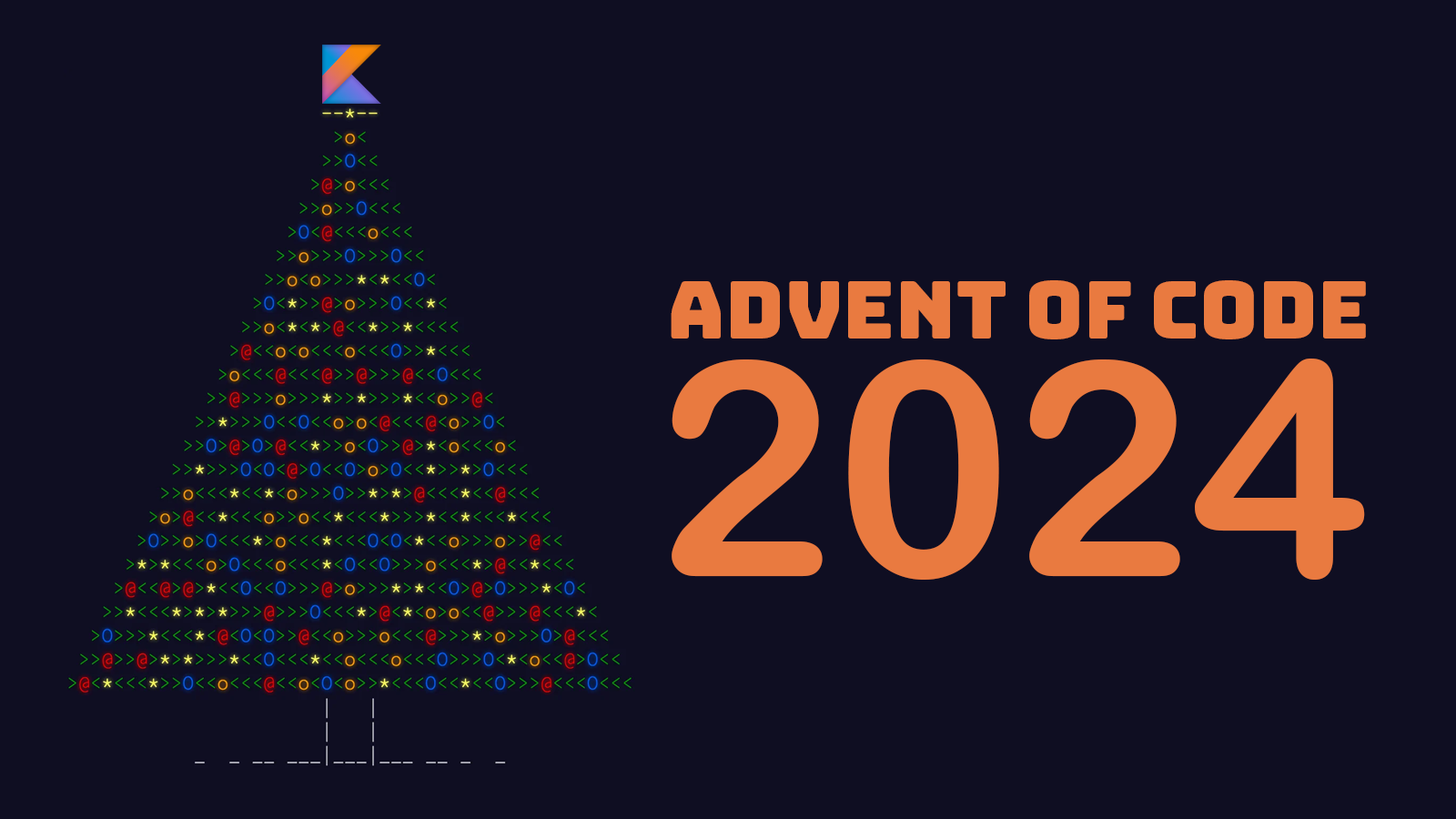
<style>
.page{position:relative;width:1456px;height:819px;background:#0f0e22}
.page>*{position:absolute;margin:0}
.t1{font:79.7px "Bungee-Regular";color:#e97a40}
.t2{font:300.4px "ArialRoundedMTBold";color:#e97a40}
</style>
<div class="page">
<p class="t1" style="left:671px;top:280px;width:695px;height:59px">Advent of Code</p>
<p class="t2" style="left:672px;top:359px;width:693px;height:221px">2024</p>
</div>
